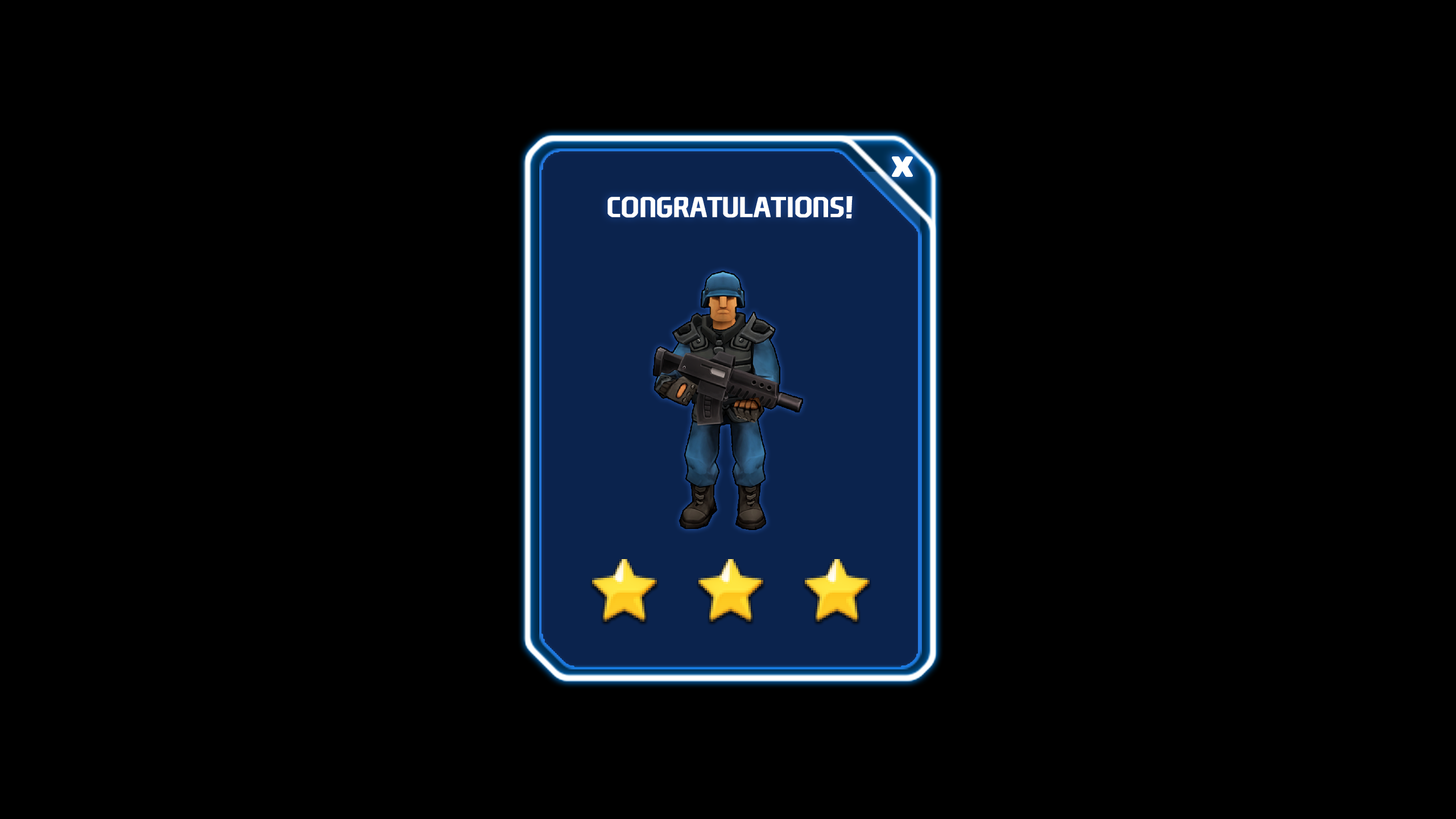
<style>
.page{position:relative;width:1456px;height:819px;background:#000000}
.page>*{position:absolute;margin:0}
.t1{font:27.3px "NEXONFootballGothicB";letter-spacing:-0.02em;color:#ffffff;text-transform:uppercase;font-weight:bold}
</style>
<div class="page">
<p class="t1" style="left:607px;top:196px;width:246px;height:22px">congratulations!</p>
</div>
